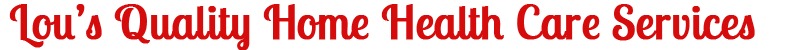
<style>
.page{position:relative;width:787px;height:50px;background:#ffffff}
.page>*{position:absolute;margin:0}
.t1{font:46.5px "LobsterTwo";color:#d60c0c;font-weight:bold}
</style>
<div class="page">
<p class="t1" style="left:9px;top:4px;width:746px;height:46px">Lou’s Quality Home Health Care Services</p>
</div>
